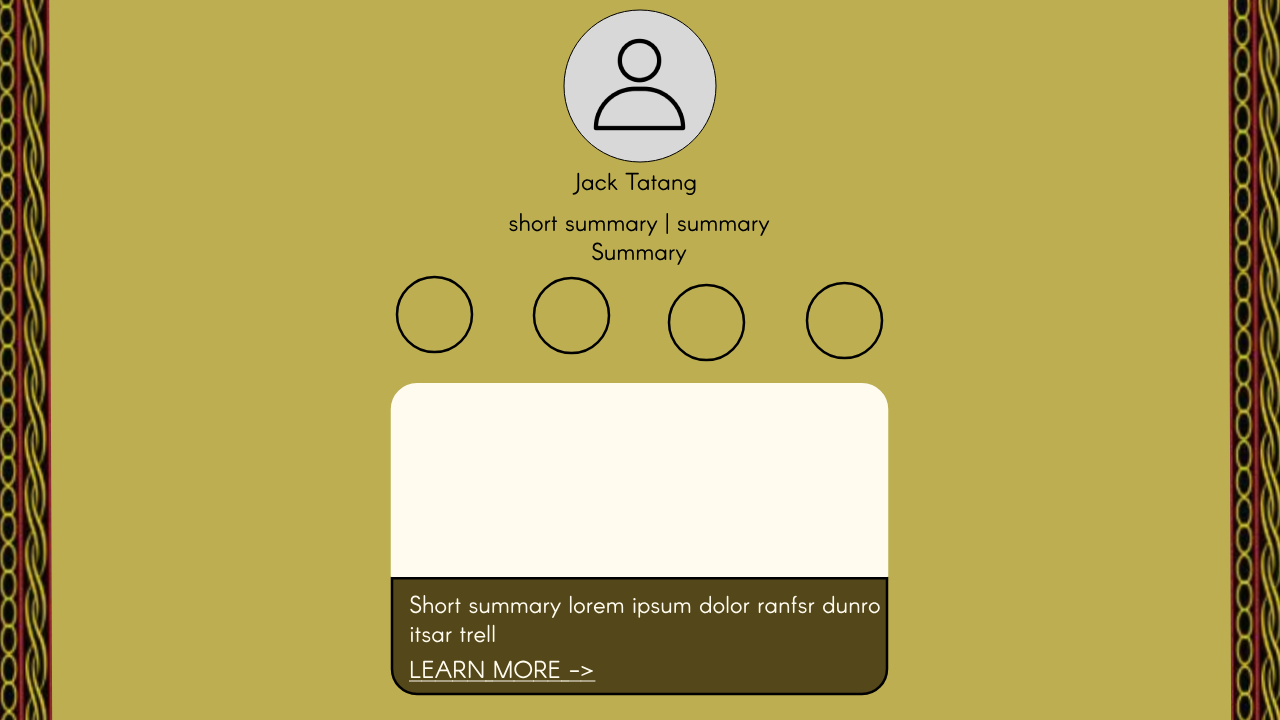
<style>
.page{position:relative;width:1280px;height:720px;background:#bcae51}
.page>*{position:absolute;margin:0}
.t1{font:24px "Arcon-Rounded-Regular";color:#000000}
.t2{font:24px "Arcon-Rounded-Regular";color:#fffbef}
.t3{font:24px "Arcon-Rounded-Regular";color:#fffbef;text-decoration:underline}
</style>
<div class="page">
<p class="t1" style="left:572px;top:172px;width:124px;height:24px">Jack Tatang</p>
<p class="t1" style="left:509px;top:212px;width:261px;height:53px;text-align:center">short summary | summary<br>Summary</p>
<p class="t2" style="left:410px;top:594px;width:470px;height:49px">Short summary lorem ipsum dolor ranfsr dunro<br>itsar trell</p>
<p class="t3" style="left:409px;top:660px;width:187px;height:22px">LEARN MORE -&gt;</p>
</div>
